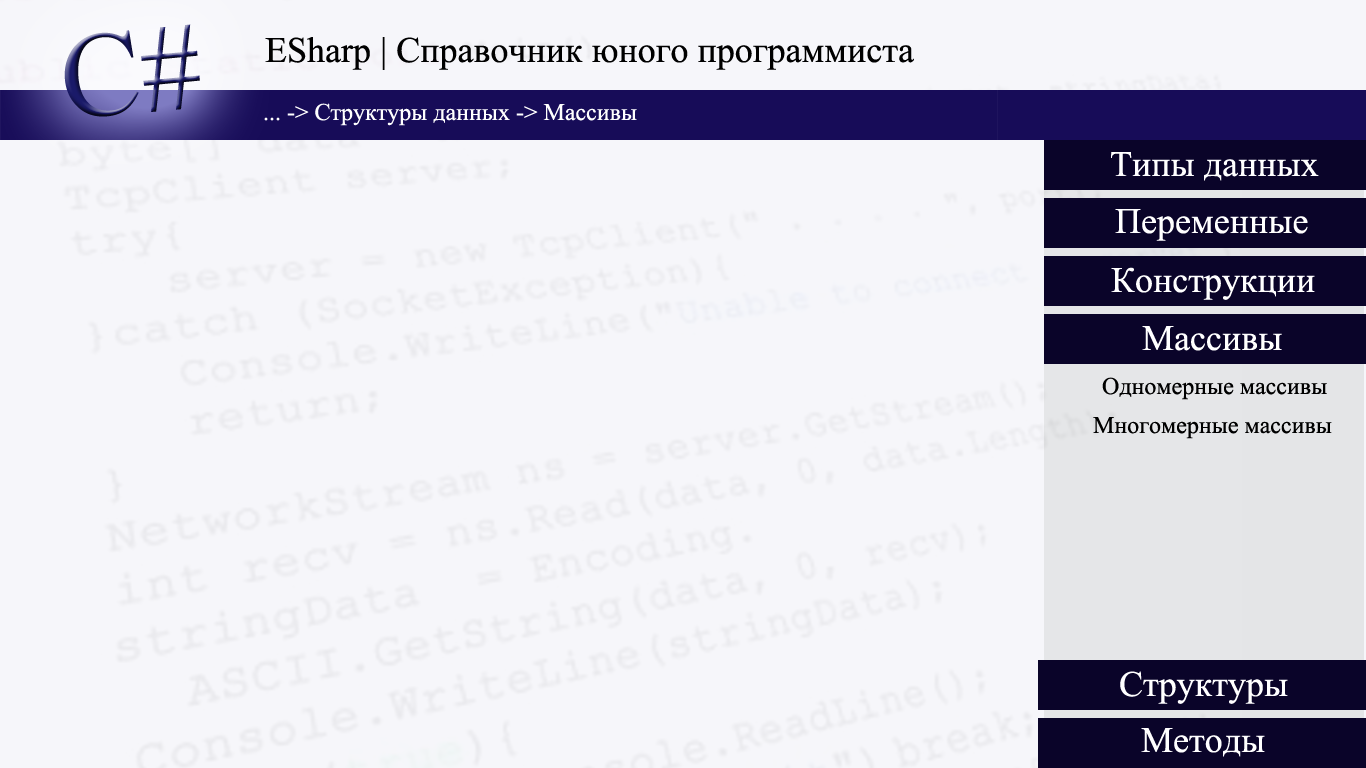
<style>
.page{position:relative;width:1366px;height:768px;background:#f6f6fa}
.page>*{position:absolute;margin:0}
.t1{font:120.4px "TimesNewRomanPSMT"}
.t2{font:36px "TimesNewRomanPSMT";color:#000000}
.t3{font:24px "TimesNewRomanPSMT";color:#ffffff}
.t4{font:36px "TimesNewRomanPSMT";color:#ffffff}
.t5{font:24px "TimesNewRomanPSMT";color:#000000}
</style>
<div class="page">
<p class="t1" style="left:64px;top:24px;width:136px;height:93px;rotate:-5deg">C#</p>
<p class="t2" style="left:265px;top:37px;width:649px;height:33px">ESharp | Справочник юного программиста</p>
<p class="t3" style="left:264px;top:103px;width:373px;height:23px">... -&gt; Структуры данных -&gt; Массивы</p>
<p class="t4" style="left:1111px;top:152px;width:208px;height:29px">Типы данных</p>
<p class="t4" style="left:1115px;top:209px;width:193px;height:32px">Переменные</p>
<p class="t4" style="left:1111px;top:267px;width:204px;height:33px">Конструкции</p>
<p class="t4" style="left:1142px;top:326px;width:140px;height:25px">Массивы</p>
<p class="t5" style="left:1102px;top:377px;width:225px;height:23px">Одномерные массивы</p>
<p class="t5" style="left:1093px;top:417px;width:239px;height:22px">Многомерные массивы</p>
<p class="t4" style="left:1120px;top:671px;width:168px;height:33px">Структуры</p>
<p class="t4" style="left:1141px;top:728px;width:124px;height:29px">Методы</p>
</div>
